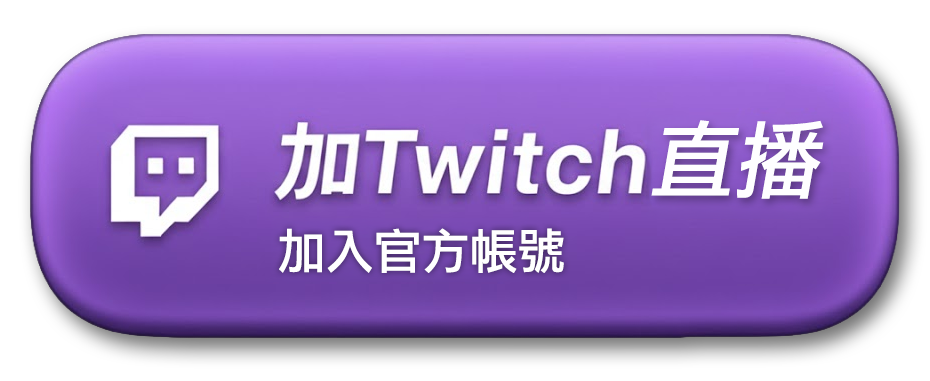
<style>
.page{position:relative;width:930px;height:381px}
.page>*{position:absolute;margin:0}
.t1{font:85px "LiHeiPro";color:#fefeff;font-style:italic}
.t2{font:48px "LiHeiPro";color:#ffffff}
</style>
<div class="page">
<p class="t1" style="left:651px;top:120px;width:173px;height:79px">直播</p>
<p class="t2" style="left:279px;top:228px;width:285px;height:45px">加入官方帳號</p>
</div>
